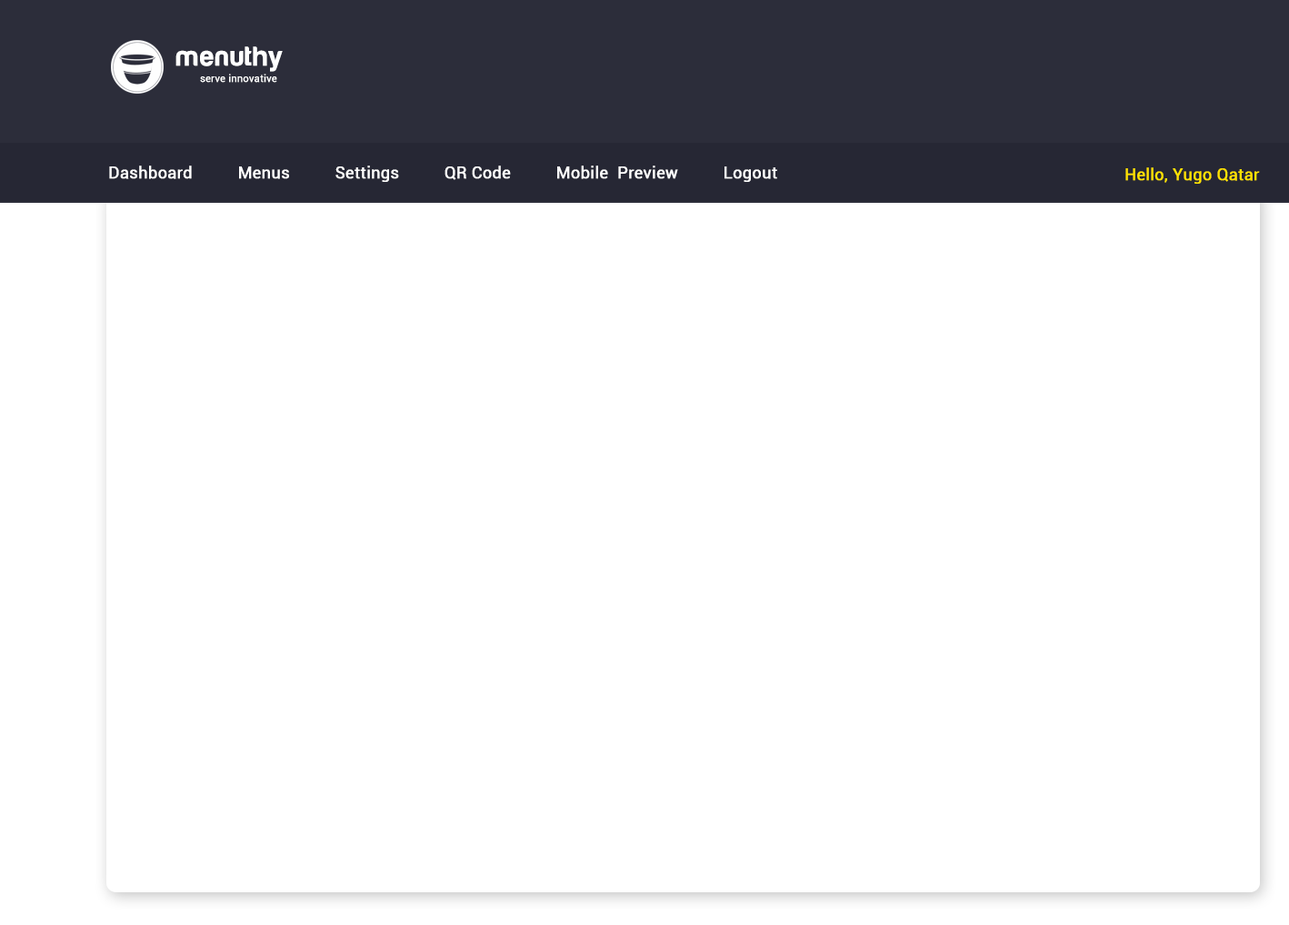
<style>
.page{position:relative;width:1289px;height:925px;background:#ffffff}
.page>*{position:absolute;margin:0}
.t1{font:27.3px "HarabaraMaisBold-HarabaraMaisBold";color:#ffffff;font-weight:bold}
.t2{font:10px "Roboto-Regular";color:#ffffff;font-weight:bold}
.t3{font:16.4px "Roboto-Regular";color:#ffffff;font-weight:bold}
.t4{font:16.4px "Roboto-Regular";color:#ffe200;font-weight:bold}
</style>
<div class="page">
<p class="t1" style="left:175px;top:46px;width:108px;height:26px">menuthy</p>
<p class="t2" style="left:200px;top:74px;width:77px;height:9px">serve innovative</p>
<p class="t3" style="left:109px;top:165px;width:668px;height:17px">Dashboard          Menus          Settings          QR Code          Mobile  Preview          Logout</p>
<p class="t4" style="left:1126px;top:167px;width:134px;height:17px">Hello, Yugo Qatar</p>
</div>
